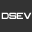
<style>
.page{position:relative;width:32px;height:32px;background:#333333}
.page>*{position:absolute;margin:0}
.t1{font:6.9px "OldRepublic-Bold";color:#ffffff}
</style>
<div class="page">
<p class="t1" style="left:1px;top:12px;width:31px;height:7px">DSEV</p>
</div>
